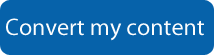
<style>
.page{position:relative;width:214px;height:55px;background:#0662aa}
.page>*{position:absolute;margin:0}
.t1{font:24px "MyriadPro-Regular";color:#fcfdfd}
</style>
<div class="page">
<p class="t1" style="left:6px;top:18px;width:198px;height:23px">Convert my content</p>
</div>
